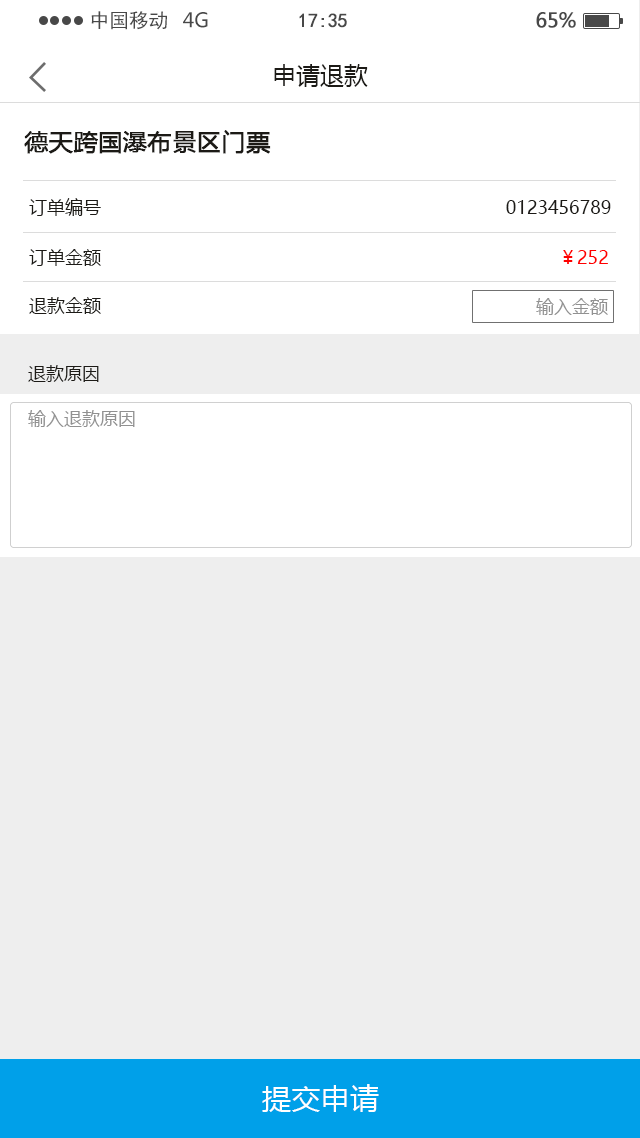
<style>
.page{position:relative;width:640px;height:1138px;background:#eeeeee}
.page>*{position:absolute;margin:0}
.t1{font:19.7px "SimHei";color:#484848}
.t2{font:19.7px "MicrosoftYaHei";color:#484848}
.t3{font:19.7px "SimHei";letter-spacing:-0.022em;color:#484848;font-weight:bold}
.t4{font:19.7px "MicrosoftYaHei";letter-spacing:-0.022em;color:#484848;font-weight:bold}
.t5{font:24px "MicrosoftYaHei";color:#1c1a16}
.t6{font:24px "MicrosoftYaHei";color:#1c1a16;font-weight:bold}
.t7{font:18px "MicrosoftYaHei";color:#1c1a16}
.t8{font:18px "MicrosoftYaHei";color:#ff0000}
.t9{font:18px "MicrosoftYaHei";color:#919191}
.t10{font:29.3px "MicrosoftYaHei";color:#ffffff}
</style>
<div class="page">
<p class="t1" style="left:91px;top:11px;width:76px;height:19px">中国移动</p>
<p class="t2" style="left:183px;top:12px;width:25px;height:16px">4G</p>
<p class="t3" style="left:299px;top:13px;width:48px;height:15px">17:35</p>
<p class="t4" style="left:536px;top:12px;width:40px;height:16px">65%</p>
<p class="t5" style="left:274px;top:64px;width:94px;height:23px">申请退款</p>
<p class="t6" style="left:24px;top:130px;width:247px;height:24px">德天跨国瀑布景区门票</p>
<p class="t7" style="left:29px;top:198px;width:582px;height:18px">订单编号                                                                            0123456789</p>
<p class="t7" style="left:29px;top:249px;width:579px;height:17px">订单金额                                                                                      <span class="t8">￥252</span></p>
<p class="t7" style="left:29px;top:297px;width:72px;height:17px">退款金额</p>
<p class="t9" style="left:536px;top:298px;width:72px;height:17px">输入金额</p>
<p class="t7" style="left:28px;top:365px;width:71px;height:17px">退款原因</p>
<p class="t9" style="left:28px;top:410px;width:107px;height:17px">输入退款原因</p>
<p class="t10" style="left:262px;top:1084px;width:117px;height:28px">提交申请</p>
</div>
